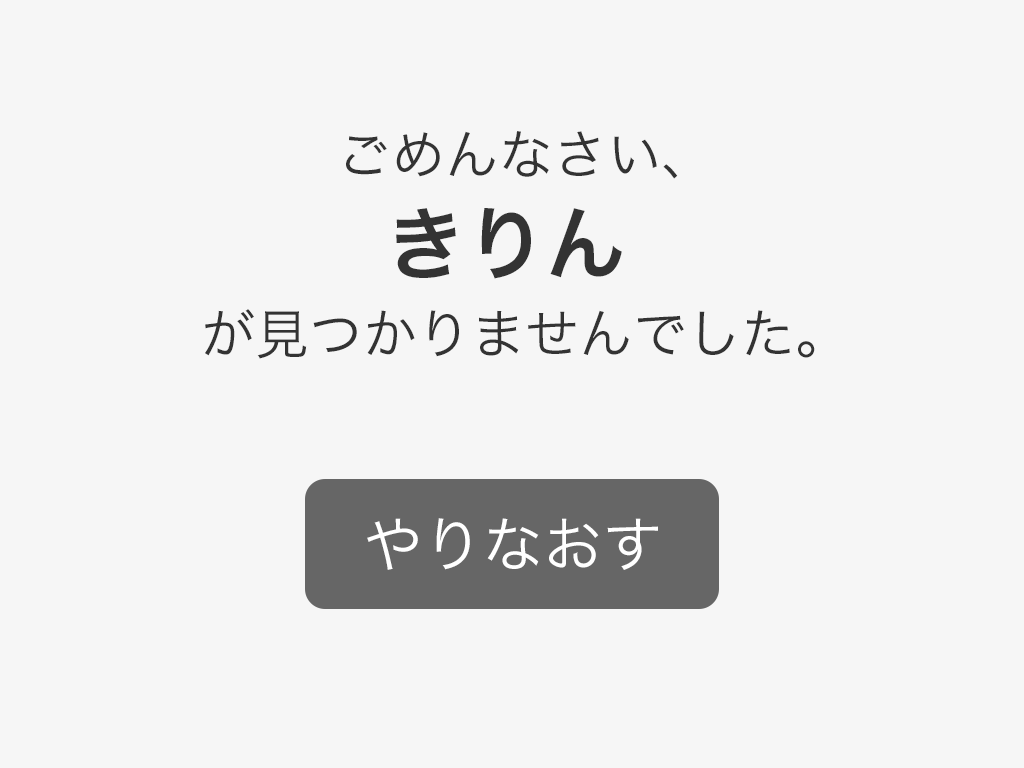
<style>
.page{position:relative;width:1024px;height:768px;background:#f6f6f6}
.page>*{position:absolute;margin:0}
.t1{font:54px "HiraKakuPro-W3";color:#333333}
.t2{font:80px "HiraKakuPro-W6";color:#333333}
.t3{font:60px "HiraKakuPro-W3";color:#ffffff}
</style>
<div class="page">
<p class="t1" style="left:346px;top:131px;width:332px;height:48px">ごめんなさい、</p>
<p class="t2" style="left:396px;top:208px;width:226px;height:71px">きりん</p>
<p class="t1" style="left:205px;top:309px;width:610px;height:50px">が見つかりませんでした。</p>
<p class="t3" style="left:367px;top:518px;width:291px;height:52px">やりなおす</p>
</div>
